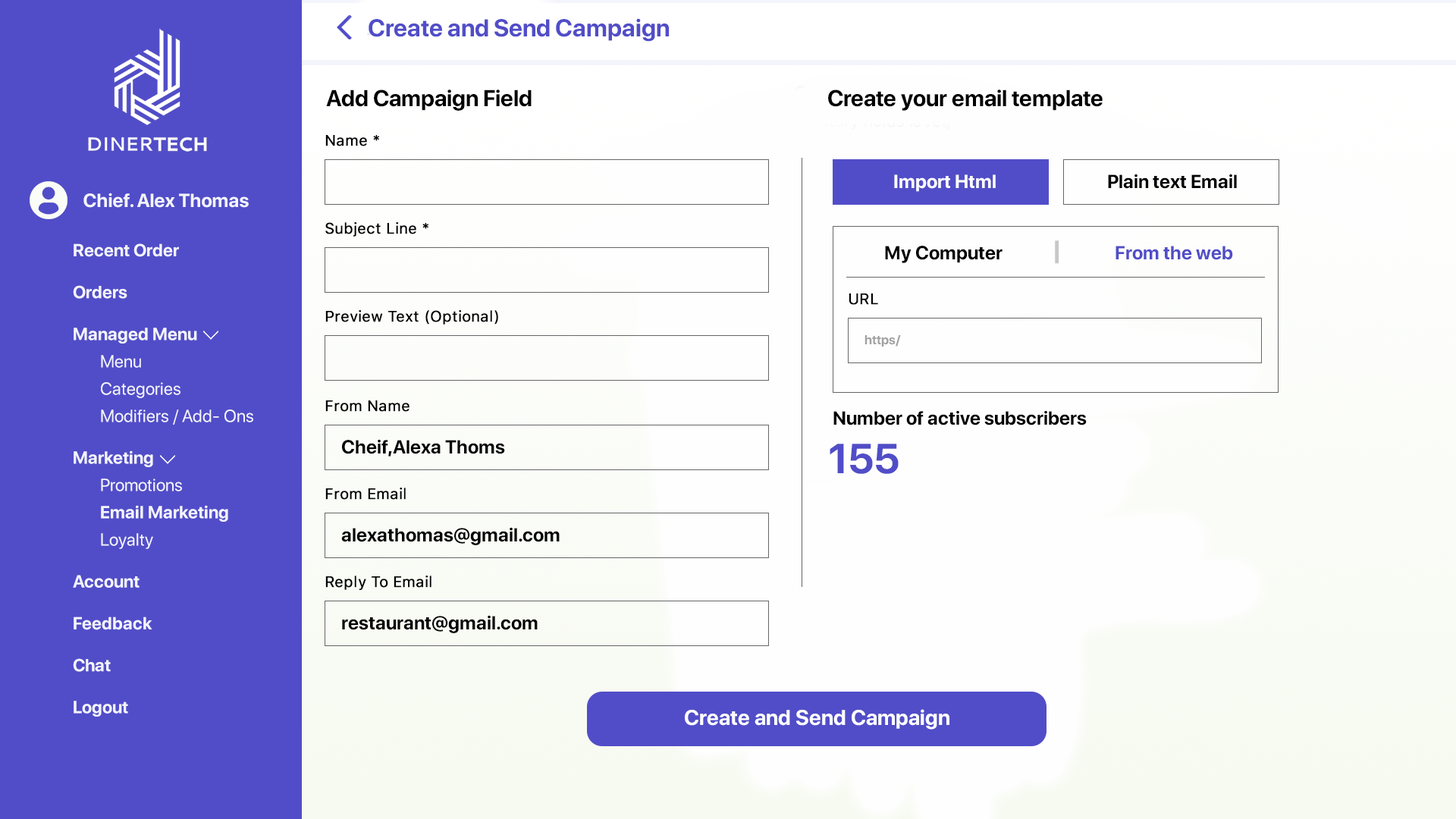
<style>
.page{position:relative;width:1456px;height:819px;background:#fefefe}
.page>*{position:absolute;margin:0}
.t1{font:24.3px "SFProDisplay-Bold";color:#514dc8}
.t2{font:22.7px "SFProDisplay-Bold";color:#000000}
.t3{font:15.2px "SFProText-Regular";color:#000000;font-weight:bold}
.t4{font:19px "SFProDisplay-Bold";color:#000000}
.t5{font:19px "SFProDisplay-Bold";color:#ffffff}
.t6{font:19px "SFProDisplay-Bold";color:#514dc8}
.t7{font:26.5px "SFProDisplay-Bold";color:#c7c7c7}
.t8{font:12.9px "SFProDisplay-Bold";color:#a2a2a2}
.t9{font:19px "SFProDisplay-Bold";color:#030303}
.t10{font:41.7px "SFProDisplay-Bold";color:#514dc8}
.t11{font:21.2px "SFProDisplay-Bold";color:#ffffff}
</style>
<div class="page">
<p class="t1" style="left:369px;top:18px;width:300px;height:24px">Create and Send Campaign</p>
<p class="t2" style="left:326px;top:89px;width:206px;height:22px">Add Campaign Field</p>
<p class="t2" style="left:828px;top:89px;width:275px;height:22px">Create your email template</p>
<p class="t3" style="left:325px;top:135px;width:54px;height:11px">Name *</p>
<p class="t4" style="left:1108px;top:174px;width:129px;height:15px">Plain text Email</p>
<p class="t5" style="left:894px;top:174px;width:102px;height:18px">Import Html</p>
<p class="t3" style="left:325px;top:222px;width:103px;height:15px">Subject Line *</p>
<p class="t6" style="left:885px;top:240px;width:348px;height:24px"><span class="t4">My Computer             </span><span class="t7">|              </span>From the web</p>
<p class="t3" style="left:849px;top:293px;width:29px;height:12px">URL</p>
<p class="t3" style="left:325px;top:310px;width:173px;height:15px">Preview Text (Optional)</p>
<p class="t8" style="left:864px;top:335px;width:37px;height:12px">https/</p>
<p class="t3" style="left:325px;top:400px;width:84px;height:12px">From Name</p>
<p class="t4" style="left:833px;top:410px;width:254px;height:15px">Number of active subscribers</p>
<p class="t9" style="left:342px;top:439px;width:163px;height:18px">Cheif,Alexa Thoms</p>
<p class="t10" style="left:830px;top:444px;width:69px;height:30px">155</p>
<p class="t3" style="left:325px;top:488px;width:81px;height:12px">From Email</p>
<p class="t9" style="left:341px;top:527px;width:219px;height:18px">alexathomas@gmail.com</p>
<p class="t3" style="left:325px;top:576px;width:106px;height:14px">Reply To Email</p>
<p class="t9" style="left:342px;top:615px;width:196px;height:18px">restaurant@gmail.com</p>
<p class="t11" style="left:685px;top:709px;width:264px;height:21px">Create and Send Campaign</p>
</div>
